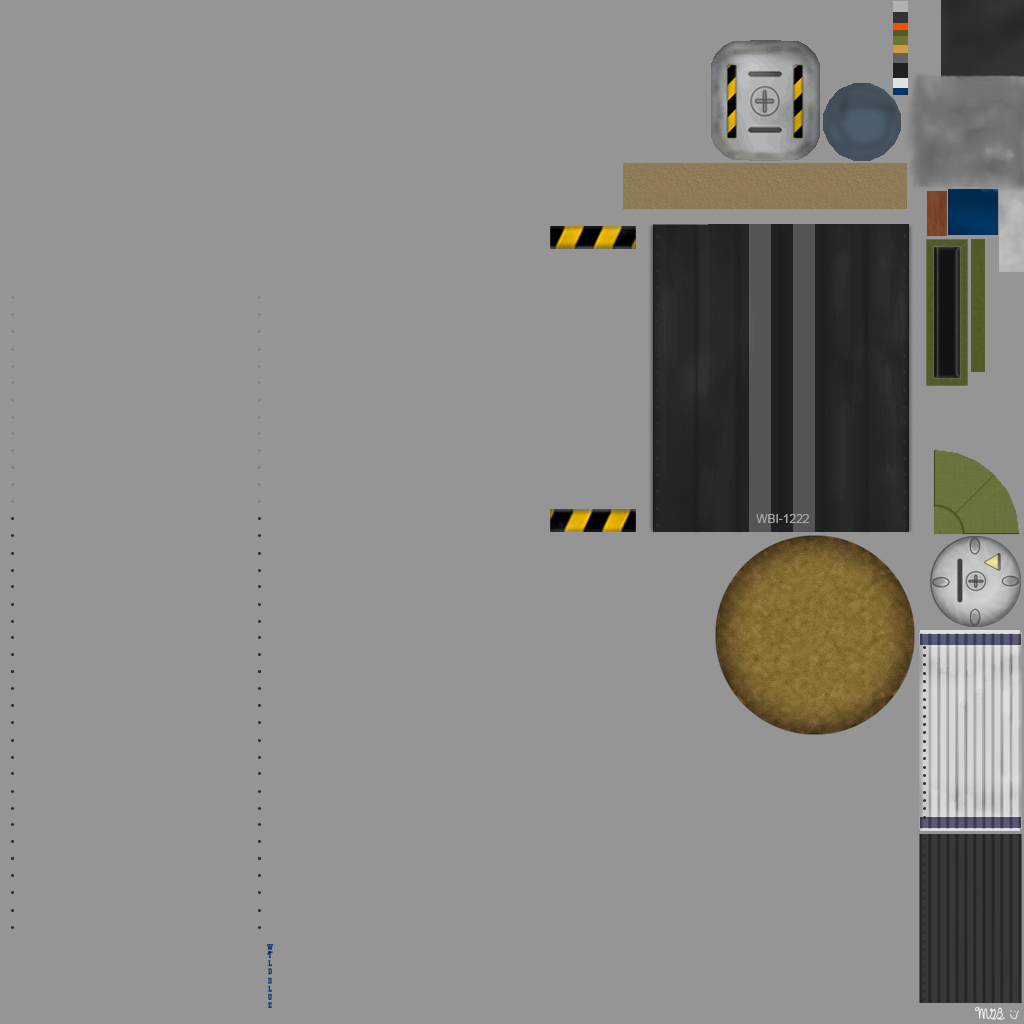
<style>
.page{position:relative;width:1024px;height:1024px;background:#959595}
.page>*{position:absolute;margin:0}
.t1{font:12px "ArialMT";color:#a9a6a6}
</style>
<div class="page">
<p class="t1" style="left:756px;top:514px;width:53px;height:9px">WBI-1222</p>
</div>
